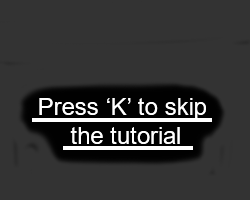
<style>
.page{position:relative;width:250px;height:200px;background:#333333}
.page>*{position:absolute;margin:0}
.t1{font:24px "ArialMT";color:#ffffff}
</style>
<div class="page">
<p class="t1" style="left:39px;top:98px;width:167px;height:46px;text-align:center">Press ‘K’ to skip <br>the tutorial</p>
</div>
